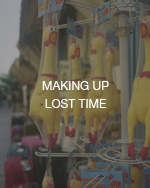
<style>
.page{position:relative;width:150px;height:188px}
.page>*{position:absolute;margin:0}
.t1{font:12px/18px "HelveticaNeue";color:#fefefe}
</style>
<div class="page">
<p class="t1" style="left:42px;top:81px;width:67px;height:27px;text-align:center">MAKING UP<br>LOST TIME</p>
</div>
